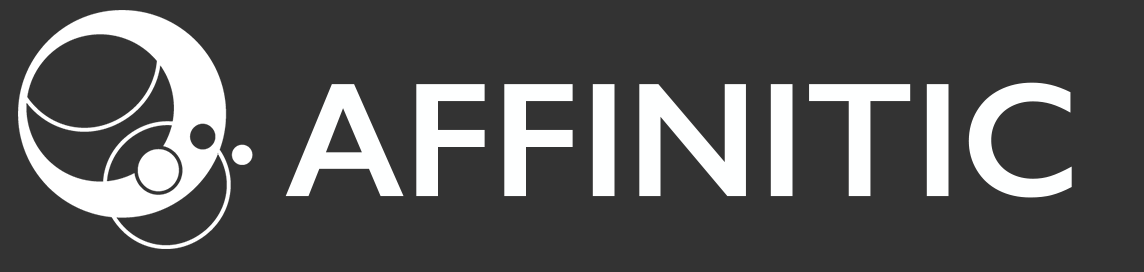
<style>
.page{position:relative;width:1144px;height:272px;background:#333333}
.page>*{position:absolute;margin:0}
.t1{font:163.7px "GillSans-SemiBold";color:#feffff}
</style>
<div class="page">
<p class="t1" style="left:285px;top:82px;width:787px;height:116px">AFFINITIC</p>
</div>
